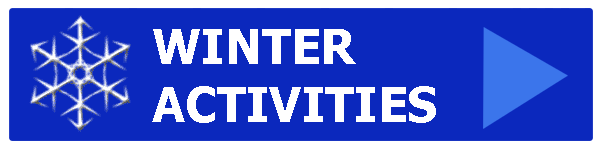
<style>
.page{position:relative;width:600px;height:150px;background:#0b28bd}
.page>*{position:absolute;margin:0}
.t1{font:48px "Tahoma-Bold";color:#ffffff}
</style>
<div class="page">
<p class="t1" style="left:152px;top:29px;width:284px;height:94px">WINTER<br>ACTIVITIES</p>
</div>
